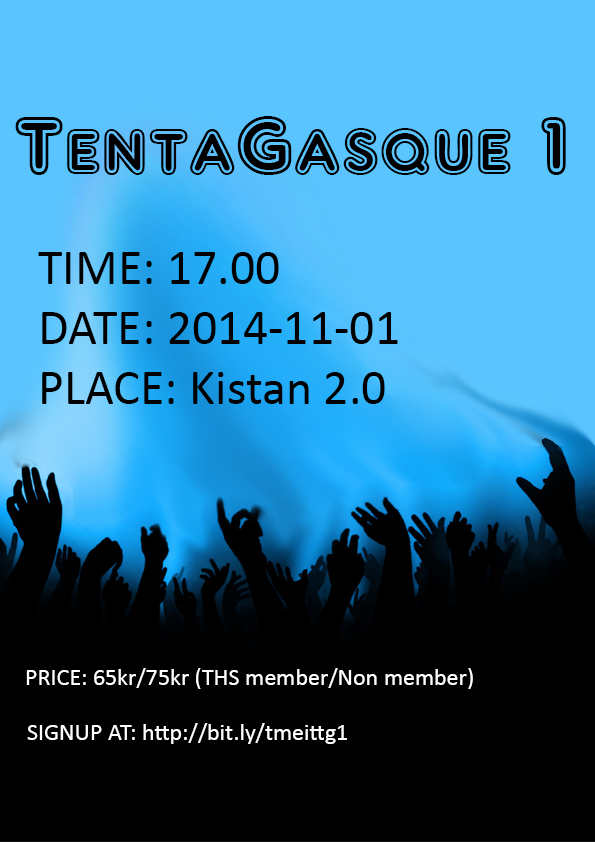
<style>
.page{position:relative;width:595px;height:842px;background:#000000}
.page>*{position:absolute;margin:0}
.t1{font:85px "ARDELANEY";color:#000000}
.t2{font:50px "Calibri";color:#000000}
.t3{font:24px "Calibri";color:#ffffff}
</style>
<div class="page">
<p class="t1" style="left:15px;top:116px;width:551px;height:59px">TentaGasque 1</p>
<p class="t2" style="left:38px;top:252px;width:360px;height:152px;text-align:right">TIME: 17.00<br>DATE: 2014-11-01<br>PLACE: Kistan 2.0</p>
<p class="t3" style="left:26px;top:668px;width:441px;height:21px">PRICE: 65kr/75kr (THS member/Non member</p>
<p class="t3" style="left:468px;top:668px;width:5px;height:21px">(</p>
<p class="t3" style="left:27px;top:723px;width:320px;height:21px">SIGNUP AT: http://bit.ly/tmeittg1</p>
</div>
